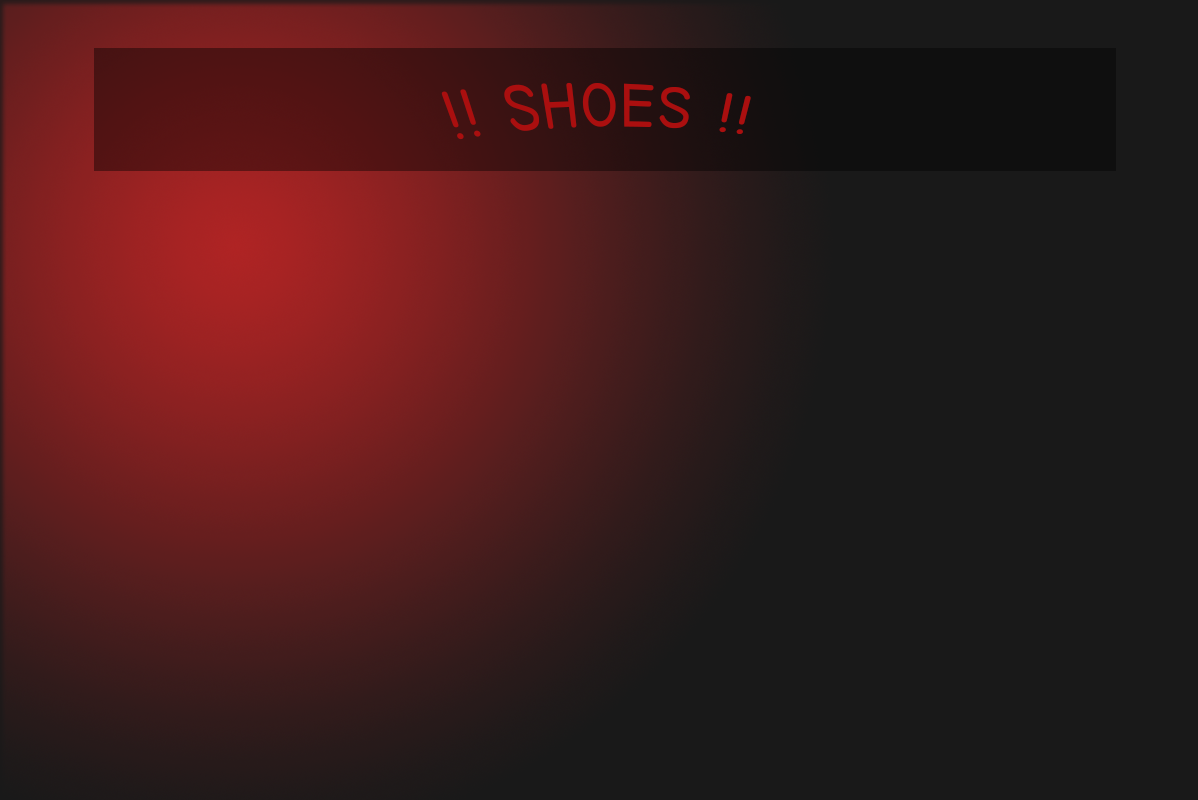
<style>
.page{position:relative;width:1198px;height:800px;background:#191919}
.page>*{position:absolute;margin:0}
.t1{font:60px "TechnicBold";color:#aa0f0f}
</style>
<div class="page">
<p class="t1" style="left:441px;top:82px;width:310px;height:58px">!! SHOES !!</p>
</div>
